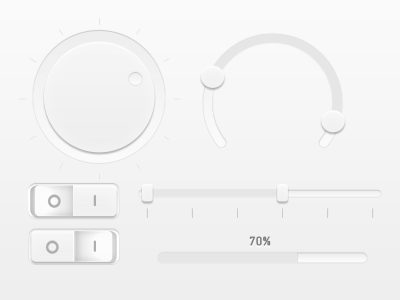
<style>
.page{position:relative;width:400px;height:300px}
.page>*{position:absolute;margin:0}
.t1{font:11.7px "Abel-Regular";color:#7b7b7b;font-weight:bold}
</style>
<div class="page">
<p class="t1" style="left:249px;top:236px;width:22px;height:10px">70%</p>
</div>
